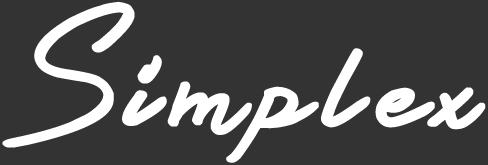
<style>
.page{position:relative;width:488px;height:165px;background:#333333}
.page>*{position:absolute;margin:0}
.t1{font:113.9px "SilentReaction";letter-spacing:0.1em;color:#ffffff;font-weight:bold}
</style>
<div class="page">
<p class="t1" style="left:2px;top:1px;width:484px;height:162px">Simplex</p>
</div>
